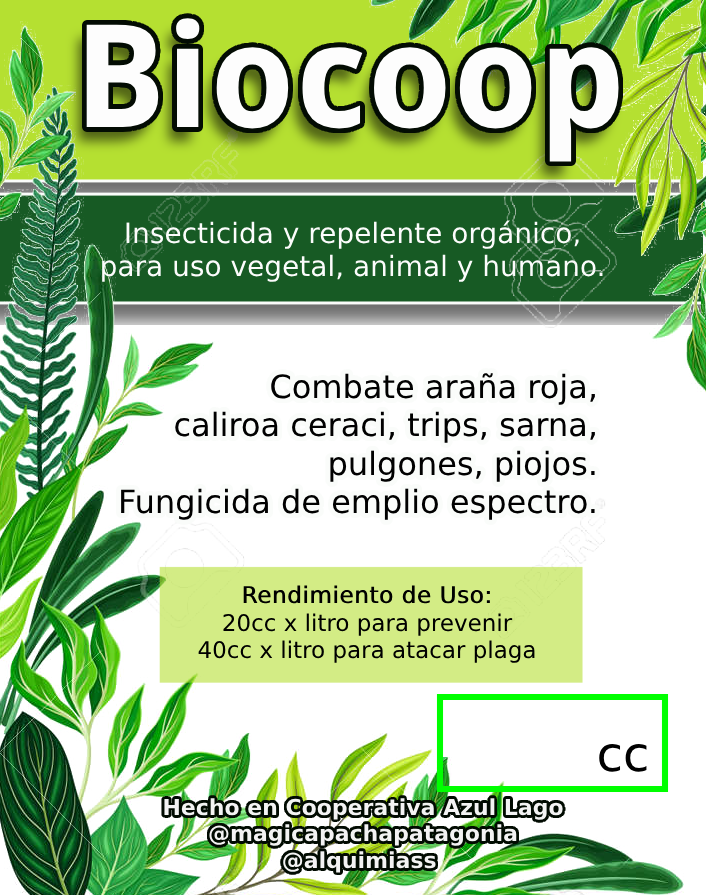
<style>
.page{position:relative;width:706px;height:895px;background:#ffffff}
.page>*{position:absolute;margin:0}
.t1{font:143.3px "DroidSans-Bold";color:#fdfdfd}
.t2{font:28px "DejaVuSans";color:#fcfcfc}
.t3{font:28px "DejaVuSans";color:#3ec962}
.t4{font:32px "DejaVuSans";color:#000000}
.t5{font:23px "DejaVuSans";color:#000000}
.t6{font:23px "DejaVuSans";color:#000000;font-weight:bold}
.t7{font:48px "DejaVuSans";color:#000000}
.t8{font:22px "DejaVuSans-Bold";color:#f3f3f3}
</style>
<div class="page">
<p class="t1" style="left:86px;top:18px;width:533px;height:144px">Biocoop</p>
<p class="t2" style="left:102px;top:220px;width:501px;height:62px;text-align:center"><span class="t3"><br></span>Insecticida y repelente orgánico, <br>para uso vegetal, animal y humano.</p>
<p class="t4" style="left:121px;top:373px;width:474px;height:147px;text-align:right">Combate araña roja,<br>caliroa ceraci, trips, sarna,<br>pulgones, piojos.<br>Fungicida de emplio espectro.</p>
<p class="t5" style="left:198px;top:585px;width:337px;height:78px;text-align:center"><span class="t6">Rendimiento de Uso:<br></span>20cc x litro para prevenir<br>40cc x litro para atacar plaga</p>
<p class="t7" style="left:599px;top:744px;width:48px;height:28px">cc</p>
<p class="t8" style="left:164px;top:798px;width:399px;height:75px;text-align:center">Hecho en Cooperativa Azul Lago<br> @magicapachapatagonia <br>@alquimiass</p>
</div>
